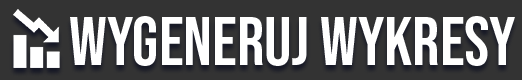
<style>
.page{position:relative;width:522px;height:80px;background:#333333}
.page>*{position:absolute;margin:0}
.t1{font:67.9px "BebasNeue-Regular";color:#ffffff}
</style>
<div class="page">
<p class="t1" style="left:70px;top:16px;width:445px;height:50px">Wygeneruj wykresy</p>
</div>
